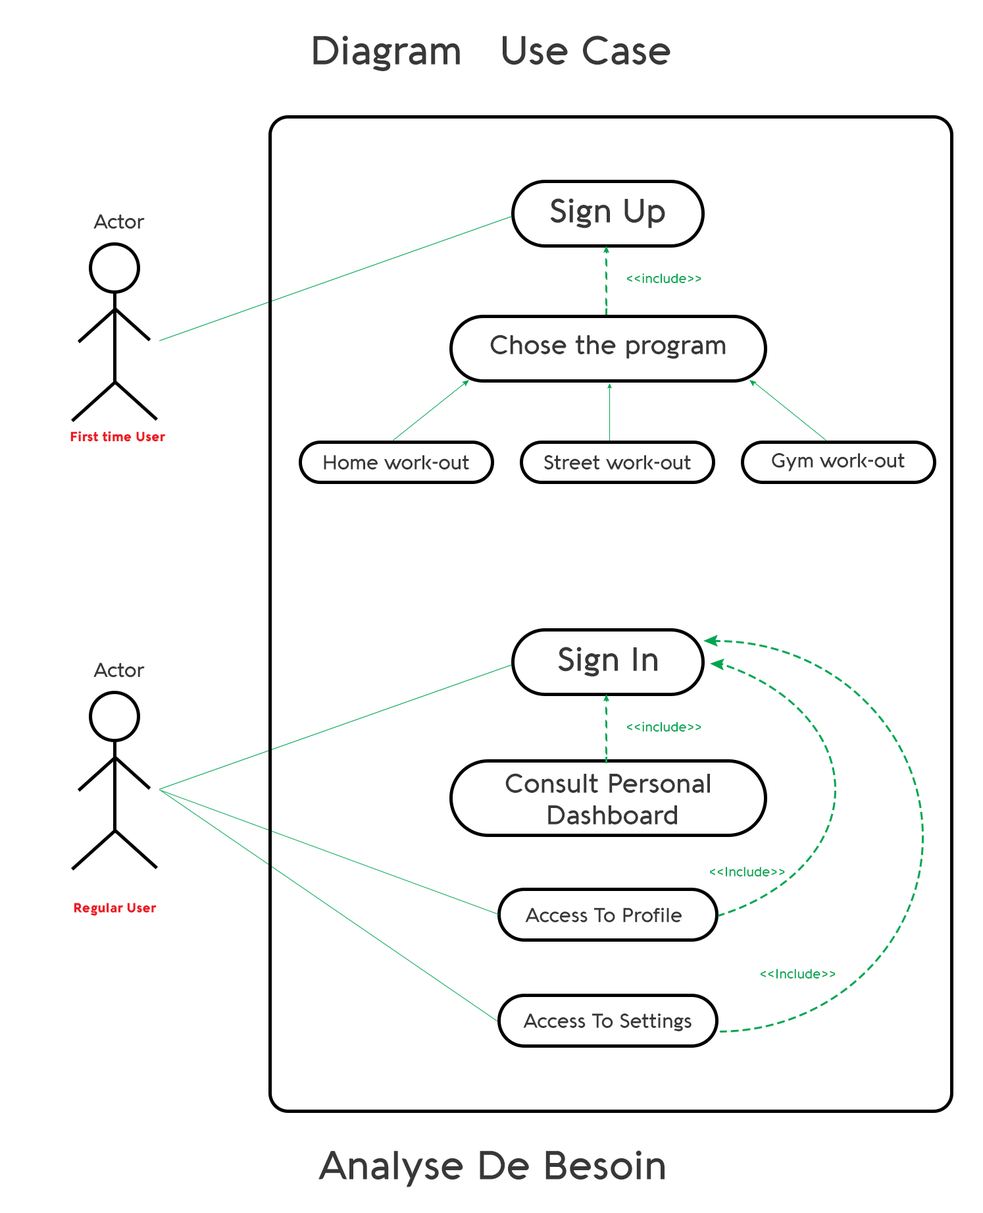
<style>
.page{position:relative;width:983px;height:1213px;background:#ffffff}
.page>*{position:absolute;margin:0}
.t1{font:39.5px "Aquawax-Medium";color:#383838}
.t2{font:32.9px "Aquawax-Medium";color:#383838}
.t3{font:19.8px "Aquawax-Medium";color:#383838}
.t4{font:13.2px "Aquawax-Medium";color:#00a651}
.t5{font:26.3px "Aquawax-Medium";color:#383838}
.t6{font:13.2px "Aquawax-Black";color:#ed1c24}
.t7{font:19.7px "Aquawax-Medium";color:#383838}
</style>
<div class="page">
<p class="t1" style="left:313px;top:36px;width:358px;height:35px">Diagram   Use Case</p>
<p class="t2" style="left:550px;top:198px;width:115px;height:30px">Sign Up</p>
<p class="t3" style="left:93px;top:214px;width:52px;height:15px">Actor</p>
<p class="t4" style="left:627px;top:273px;width:75px;height:10px">&lt;&lt;include&gt;&gt;</p>
<p class="t5" style="left:490px;top:334px;width:236px;height:25px">Chose the program</p>
<p class="t6" style="left:70px;top:431px;width:96px;height:11px">First time User</p>
<p class="t7" style="left:324px;top:455px;width:145px;height:14px">Home work-out</p>
<p class="t7" style="left:544px;top:455px;width:147px;height:14px">Street work-out</p>
<p class="t7" style="left:772px;top:453px;width:133px;height:18px">Gym work-out</p>
<p class="t2" style="left:558px;top:646px;width:100px;height:31px">Sign In</p>
<p class="t3" style="left:93px;top:662px;width:52px;height:15px">Actor</p>
<p class="t4" style="left:627px;top:721px;width:75px;height:10px">&lt;&lt;include&gt;&gt;</p>
<p class="t5" style="left:506px;top:773px;width:204px;height:51px;text-align:center">Consult Personal <br>Dashboard</p>
<p class="t4" style="left:710px;top:866px;width:75px;height:10px">&lt;&lt;Include&gt;&gt;</p>
<p class="t6" style="left:74px;top:902px;width:83px;height:14px">Regular User</p>
<p class="t7" style="left:525px;top:907px;width:157px;height:15px">Access To Profile</p>
<p class="t4" style="left:761px;top:968px;width:75px;height:10px">&lt;&lt;Include&gt;&gt;</p>
<p class="t7" style="left:523px;top:1013px;width:169px;height:18px">Access To Settings</p>
<p class="t1" style="left:319px;top:1150px;width:346px;height:37px">Analyse De Besoin</p>
</div>
